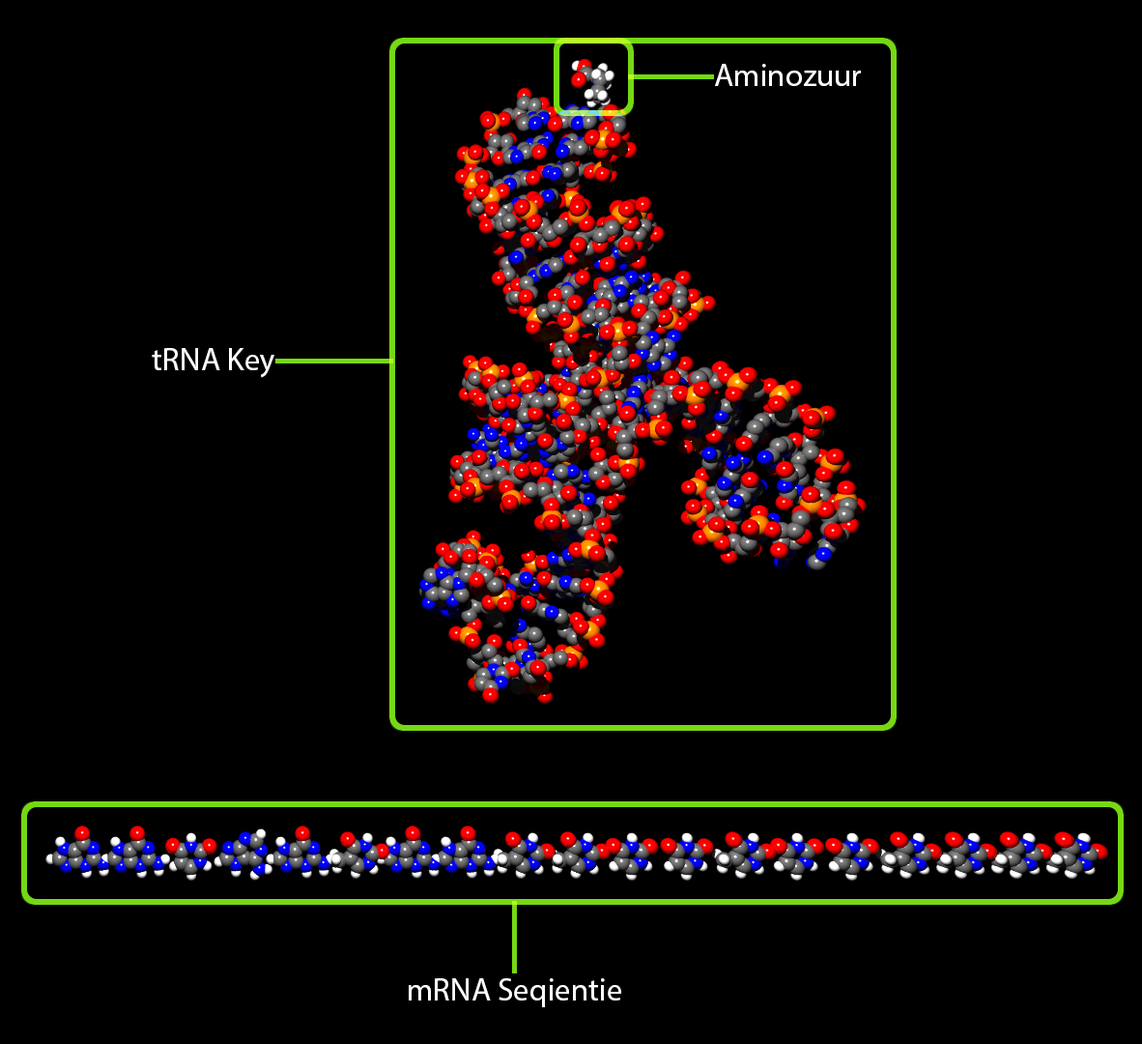
<style>
.page{position:relative;width:1142px;height:1044px;background:#000000}
.page>*{position:absolute;margin:0}
.t1{font:31.9px "MyriadPro-Regular";color:#ffffff}
</style>
<div class="page">
<p class="t1" style="left:715px;top:64px;width:146px;height:22px">Aminozuur</p>
<p class="t1" style="left:152px;top:348px;width:122px;height:30px">tRNA Key</p>
<p class="t1" style="left:409px;top:978px;width:212px;height:29px">mRNA Seqientie</p>
</div>
